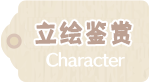
<style>
.page{position:relative;width:149px;height:82px}
.page>*{position:absolute;margin:0}
.t1{font:26.1px "shetumodengxiaofangti";color:#bda193;font-weight:bold;scale:0.94 1}
</style>
<div class="page">
<p class="t1" style="left:35px;top:20px;width:97px;height:25px">立绘鉴赏</p>
</div>
